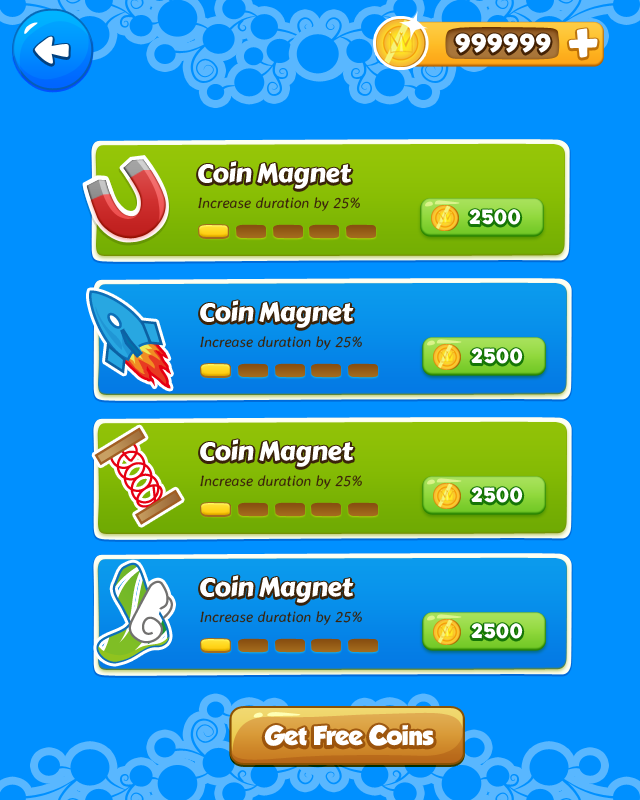
<style>
.page{position:relative;width:640px;height:800px;background:#0090ff}
.page>*{position:absolute;margin:0}
.t1{font:25px "Skranji-Bold";letter-spacing:0.025em;color:#ffffff}
.t2{font:26px "CarterOne";letter-spacing:-0.02em;color:#ffffff}
.t3{font:15px "AveriaSansLibre-LightItalic";color:#3a230a}
.t4{font:20px "Skranji-Bold";letter-spacing:0.025em;color:#ffffff}
.t5{font:24px "GROBOLD";letter-spacing:-0.02em;color:#ffffff}
</style>
<div class="page">
<p class="t1" style="left:455px;top:33px;width:96px;height:20px">999999</p>
<p class="t2" style="left:198px;top:161px;width:154px;height:28px">Coin Magnet</p>
<p class="t3" style="left:198px;top:197px;width:162px;height:15px">Increase duration by 25%</p>
<p class="t4" style="left:469px;top:209px;width:52px;height:16px">2500</p>
<p class="t2" style="left:200px;top:300px;width:154px;height:28px">Coin Magnet</p>
<p class="t3" style="left:200px;top:336px;width:162px;height:15px">Increase duration by 25%</p>
<p class="t4" style="left:471px;top:348px;width:52px;height:16px">2500</p>
<p class="t2" style="left:200px;top:439px;width:154px;height:28px">Coin Magnet</p>
<p class="t3" style="left:200px;top:475px;width:162px;height:15px">Increase duration by 25%</p>
<p class="t4" style="left:471px;top:487px;width:52px;height:16px">2500</p>
<p class="t2" style="left:200px;top:575px;width:154px;height:28px">Coin Magnet</p>
<p class="t3" style="left:200px;top:611px;width:162px;height:15px">Increase duration by 25%</p>
<p class="t4" style="left:471px;top:623px;width:52px;height:16px">2500</p>
<p class="t5" style="left:264px;top:724px;width:170px;height:22px">Get Free Coins</p>
</div>
